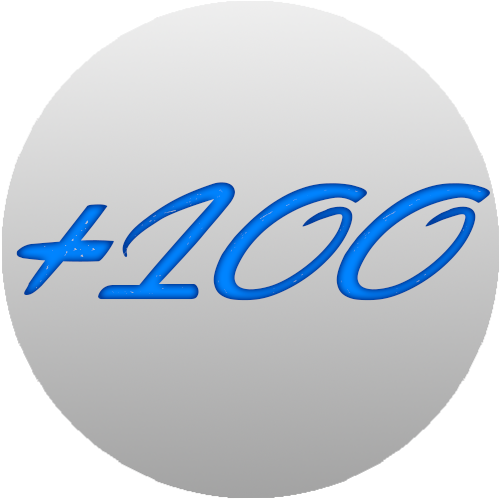
<style>
.page{position:relative;width:500px;height:500px;background:#ffffff}
.page>*{position:absolute;margin:0}
.t1{font:289px "Acceleration-&-Reaction"}
.t2{font:725.5px "Acceleration-&-Reaction"}
</style>
<div class="page">
<p class="t1" style="left:98px;top:182px;width:392px;height:119px">100</p>
<p class="t2" style="left:16px;top:204px;width:98px;height:91px">+</p>
</div>
